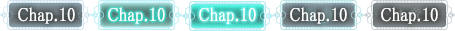
<style>
.page{position:relative;width:455px;height:31px}
.page>*{position:absolute;margin:0}
.t1{font:19px "MS-PMincho";color:#ffffff;font-weight:bold;scale:0.84 1}
</style>
<div class="page">
<p class="t1" style="left:18px;top:7px;width:57px;height:17px">Chap.10</p>
<p class="t1" style="left:108px;top:7px;width:57px;height:17px">Chap.10</p>
<p class="t1" style="left:199px;top:7px;width:57px;height:17px">Chap.10</p>
<p class="t1" style="left:290px;top:7px;width:57px;height:17px">Chap.10</p>
<p class="t1" style="left:381px;top:7px;width:57px;height:17px">Chap.10</p>
</div>
